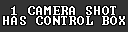
<style>
.page{position:relative;width:128px;height:32px;background:#333333}
.page>*{position:absolute;margin:0}
.t1{font:12px/10px "Terminal";letter-spacing:0.075em;color:#ffffff}
</style>
<div class="page">
<p class="t1" style="left:3px;top:6px;width:122px;height:19px;text-align:center">1 CAMERA SHOT<br>HAS CONTROL BOX</p>
</div>
